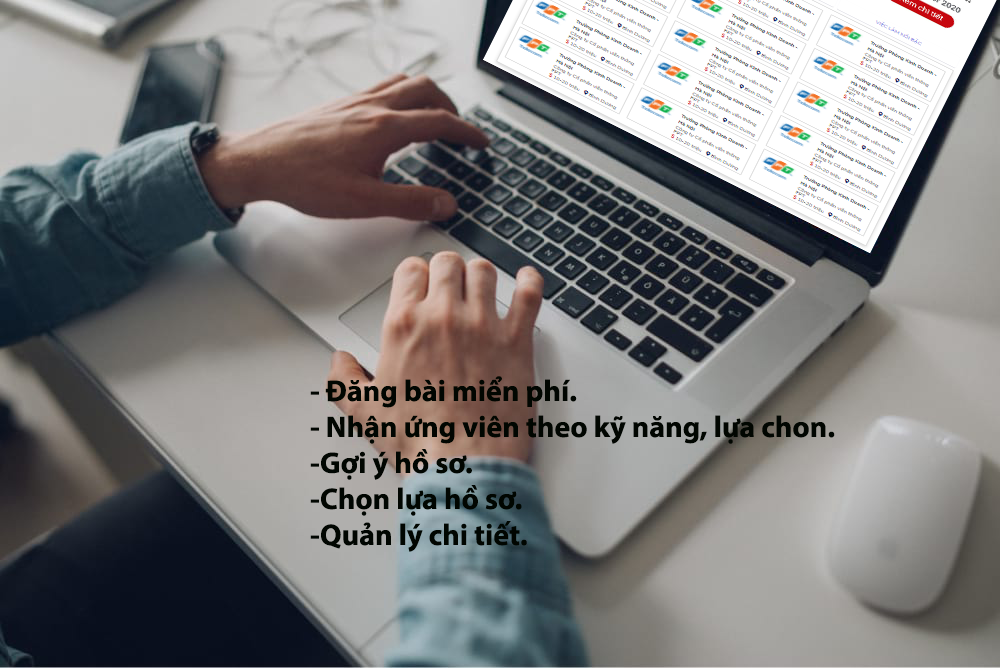
<style>
.page{position:relative;width:1000px;height:668px}
.page>*{position:absolute;margin:0}
.t1{font:30px "MyriadPro-Bold";color:#010601}
</style>
<div class="page">
<p class="t1" style="left:310px;top:376px;width:525px;height:176px">- Đăng bài miển phí.<br>- Nhận ứng viên theo kỹ năng, lựa chon.<br>-Gợi ý hồ sơ.<br>-Chọn lựa hồ sơ.<br>-Quản lý chi tiết.</p>
</div>
